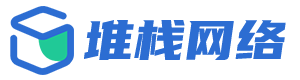
<style>
.page{position:relative;width:300px;height:80px;background:#ffffff}
.page>*{position:absolute;margin:0}
.t1{font:55px "YouSheBiaoTiHei";color:#2c6dd2}
</style>
<div class="page">
<p class="t1" style="left:84px;top:20px;width:202px;height:40px">堆栈网络</p>
</div>
